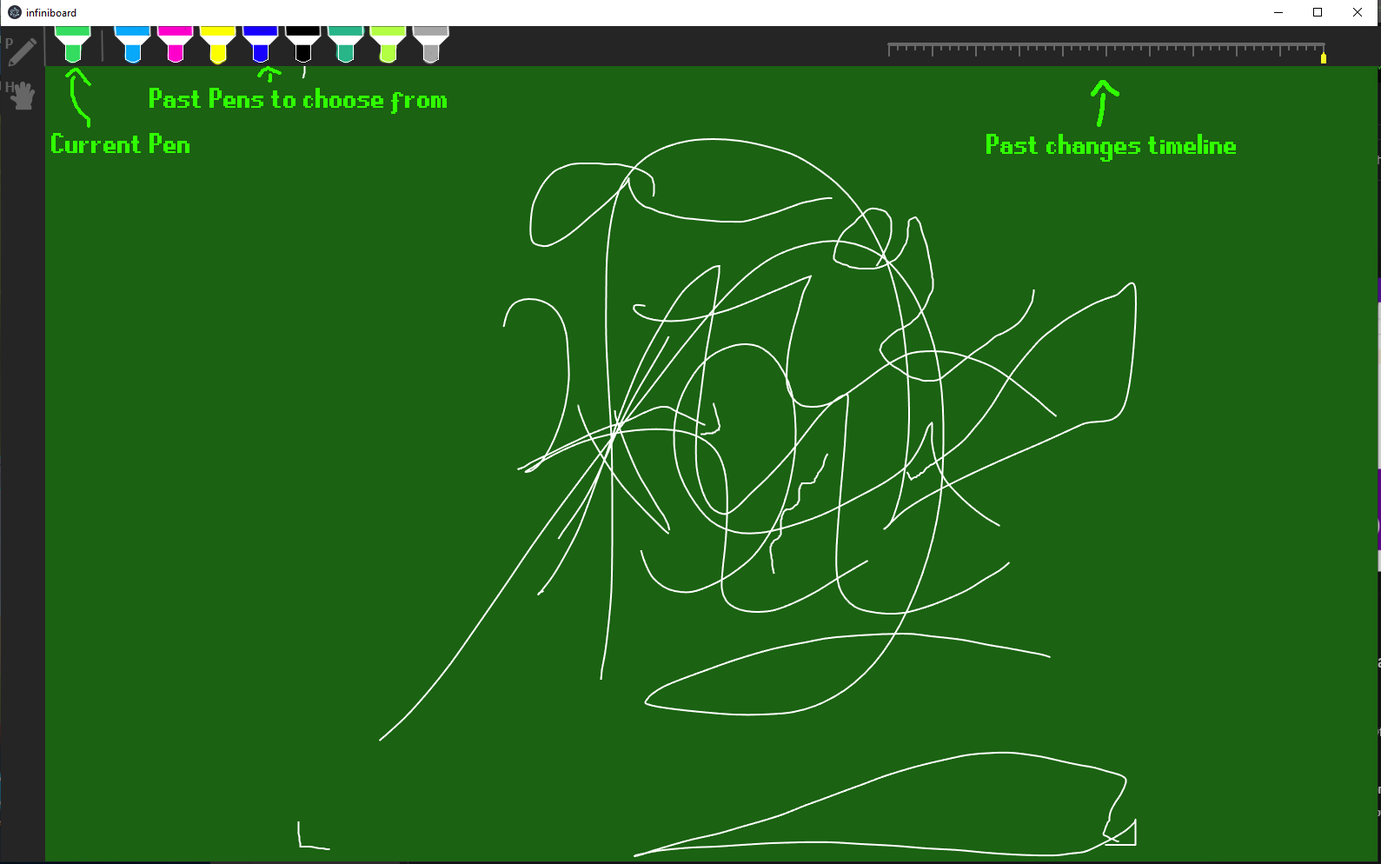
<style>
.page{position:relative;width:1381px;height:864px;background:#1b6212}
.page>*{position:absolute;margin:0}
.t1{font:31.3px "RuneScape-UF";color:#30ff00}
</style>
<div class="page">
<p class="t1" style="left:149px;top:88px;width:298px;height:26px">Past Pens to choose from</p>
<p class="t1" style="left:51px;top:133px;width:138px;height:20px">Current Pen</p>
<p class="t1" style="left:986px;top:134px;width:250px;height:28px">Past changes timeline</p>
</div>
